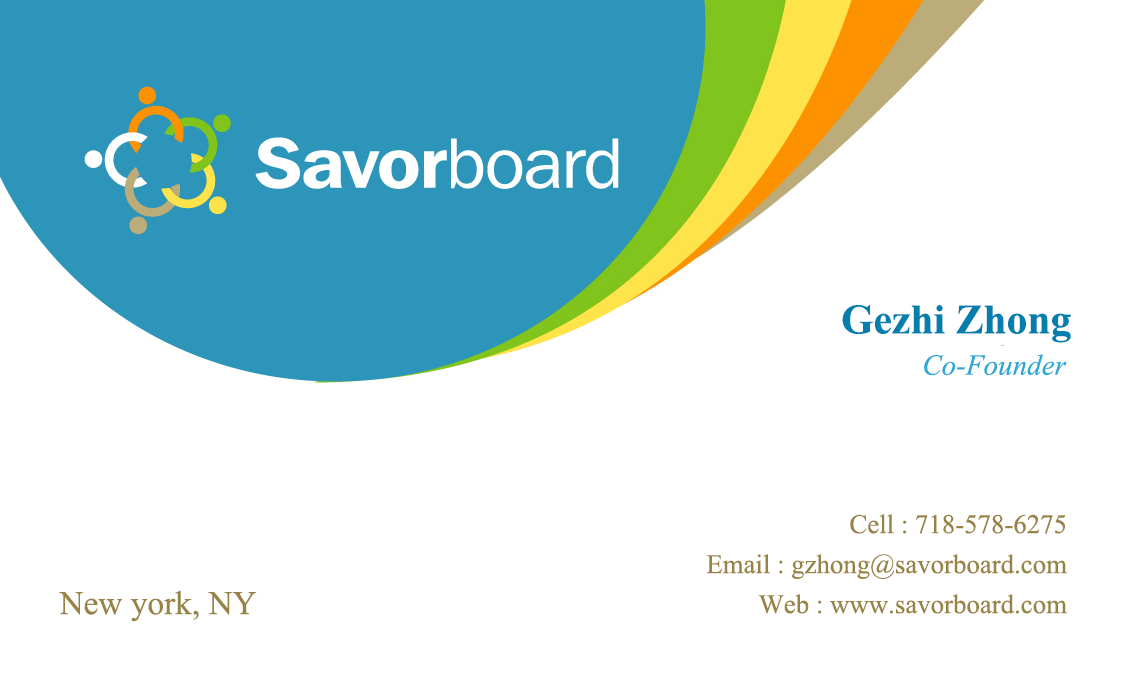
<style>
.page{position:relative;width:1125px;height:675px;background:#ffffff}
.page>*{position:absolute;margin:0}
.t1{font:41.7px "TimesNewRomanPS-BoldMT";color:#027fad}
.t2{font:37.5px "Kokila-Italic";color:#2ba8d5}
.t3{font:33.3px "Aparajita";color:#988344}
.t4{font:33.3px "TimesNewRomanPSMT";color:#988344}
</style>
<div class="page">
<p class="t1" style="left:842px;top:305px;width:229px;height:38px">Gezhi Zhong</p>
<p class="t2" style="left:924px;top:354px;width:143px;height:22px">Co-Founder</p>
<p class="t3" style="left:706px;top:514px;width:361px;height:100px;text-align:right">Cell : 718-578-6275<br>Email : gzhong@savorboard.com<br>Web : www.savorboard.com</p>
<p class="t4" style="left:59px;top:590px;width:198px;height:32px">New york, NY</p>
</div>
